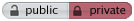
<style>
.page{position:relative;width:134px;height:21px;background:#ffffff}
.page>*{position:absolute;margin:0}
.t1{font:11px "LucidaGrande";color:#000000}
</style>
<div class="page">
<p class="t1" style="left:26px;top:5px;width:32px;height:11px">public</p>
<p class="t1" style="left:90px;top:5px;width:36px;height:11px">private</p>
</div>
